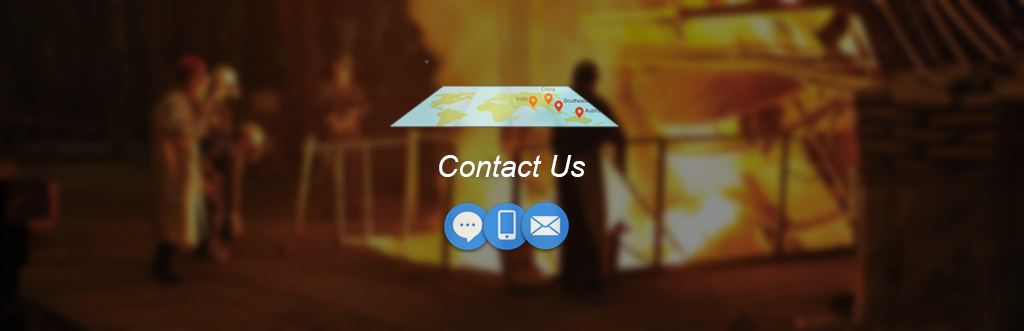
<style>
.page{position:relative;width:1024px;height:331px}
.page>*{position:absolute;margin:0}
.t1{font:30px "Arial-ItalicMT";color:#ffffff}
</style>
<div class="page">
<p class="t1" style="left:439px;top:155px;width:146px;height:22px">Contact Us</p>
</div>
